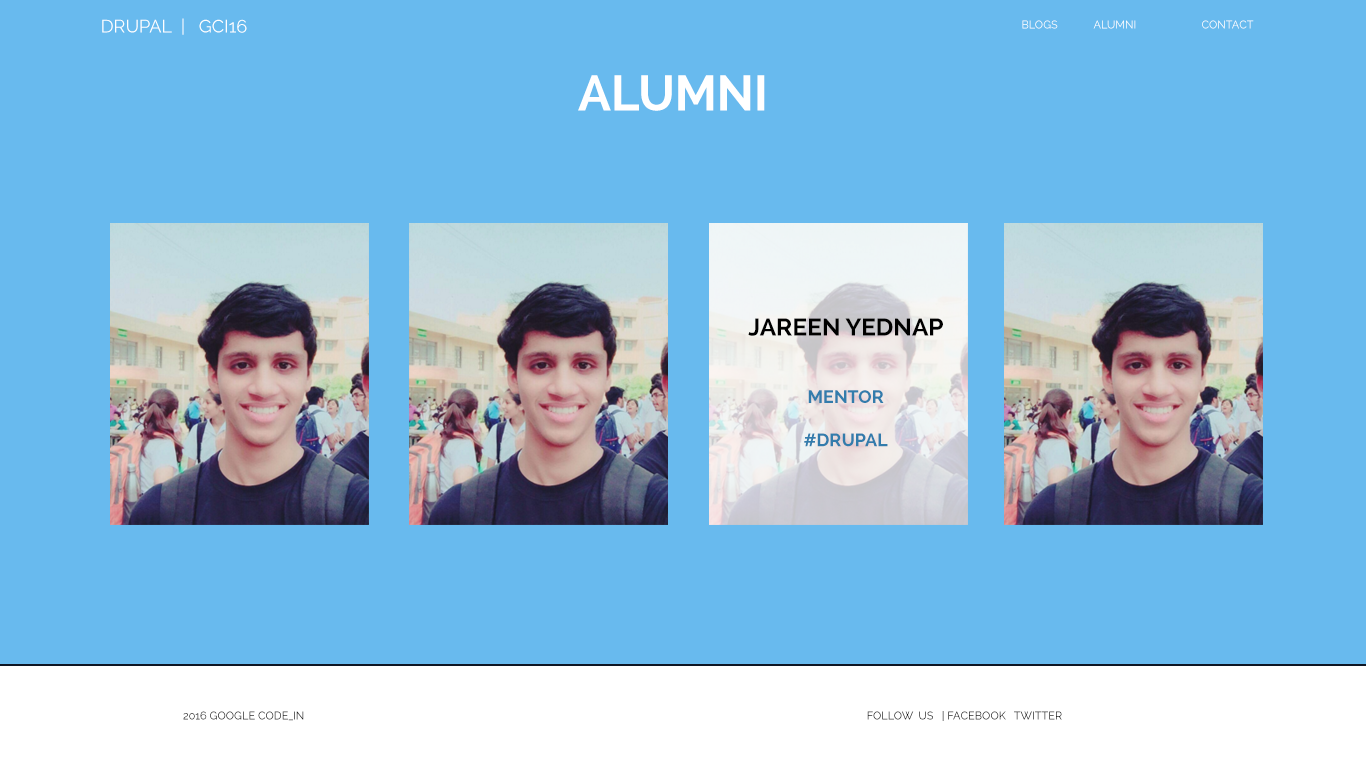
<style>
.page{position:relative;width:1366px;height:768px;background:#68baee}
.page>*{position:absolute;margin:0}
.t1{font:18px "Raleway-Regular";color:#ffffff}
.t2{font:11px "Raleway-Regular";color:#ffffff}
.t3{font:49.8px "Raleway-Bold";color:#ffffff}
.t4{font:24px "Raleway-Bold";color:#000000}
.t5{font:18px "Raleway-Bold";color:#337cac}
.t6{font:11px "Raleway-Regular";color:#000000}
</style>
<div class="page">
<p class="t1" style="left:102px;top:18px;width:145px;height:17px">DRUPAL  |   GCI16</p>
<p class="t2" style="left:1022px;top:20px;width:232px;height:9px">BLOGS ALUMNI  CONTACT</p>
<p class="t3" style="left:578px;top:75px;width:187px;height:36px">ALUMNI</p>
<p class="t4" style="left:748px;top:318px;width:195px;height:18px">JAREEN YEDNAP</p>
<p class="t5" style="left:804px;top:390px;width:84px;height:57px;text-align:center">MENTOR<br><br>#DRUPAL</p>
<p class="t6" style="left:183px;top:711px;width:879px;height:10px">2016 GOOGLE CODE_IN                FOLLOW  US   | FACEBOOK   TWITTER</p>
</div>
